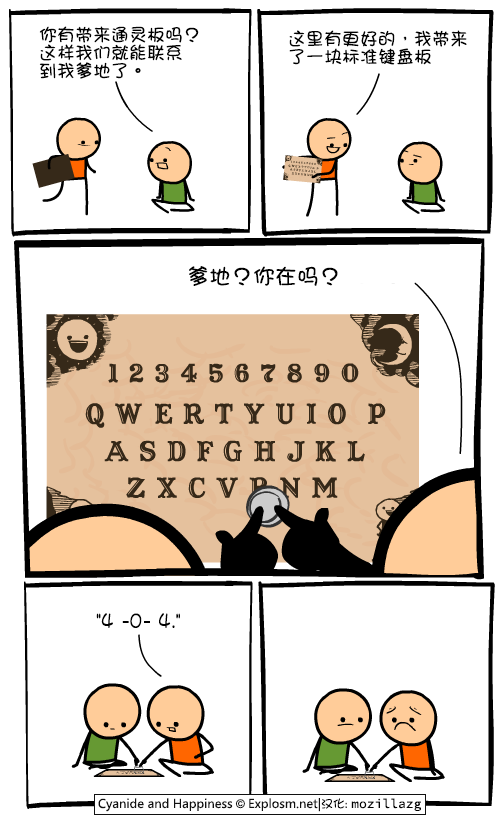
<style>
.page{position:relative;width:500px;height:830px;background:#ffffff}
.page>*{position:absolute;margin:0}
.t1{font:18px/18px "DFGirl";color:#000000}
.t2{font:22px "DFGirl";color:#000000}
</style>
<div class="page">
<p class="t1" style="left:39px;top:26px;width:160px;height:53px">你有带来通灵板吗？<br>这样我们就能联系<br>到我爹地了。</p>
<p class="t1" style="left:289px;top:30px;width:178px;height:35px">这里有更好的，我带来<br>了一块标准键盘板</p>
<p class="t2" style="left:189px;top:266px;width:149px;height:20px">爹地？你在吗？</p>
<p class="t2" style="left:96px;top:613px;width:84px;height:15px">"4 -0- 4."</p>
</div>
